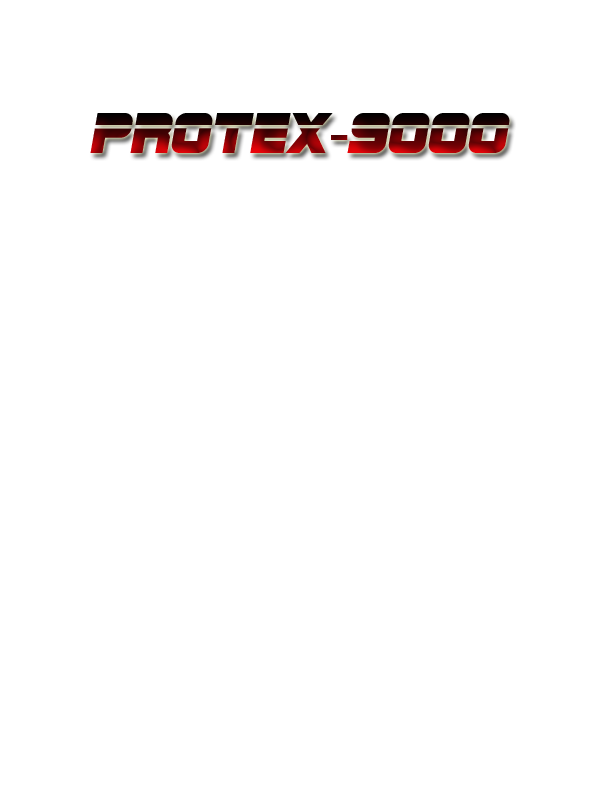
<style>
.page{position:relative;width:612px;height:792px;background:#ffffff}
.page>*{position:absolute;margin:0}
.t1{font:60px "SFSportsNight"}
.t2{font:60px "ArialMT"}
</style>
<div class="page">
<p class="t1" style="left:90px;top:113px;width:420px;height:40px">ProteX<span class="t2">-</span>9000</p>
</div>
